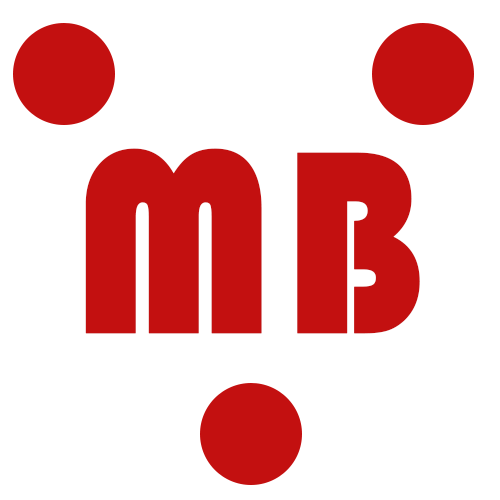
<style>
.page{position:relative;width:500px;height:500px;background:#ffffff}
.page>*{position:absolute;margin:0}
.t1{font:270.4px "Bauhaus93";color:#c31010;font-weight:bold;scale:0.92 1}
</style>
<div class="page">
<p class="t1" style="left:85px;top:148px;width:335px;height:186px">MB</p>
</div>
